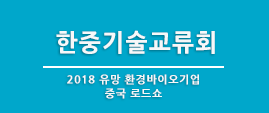
<style>
.page{position:relative;width:269px;height:113px;background:#00a7cb}
.page>*{position:absolute;margin:0}
.t1{font:24px "NanumGothicExtraBold";letter-spacing:0.05em;color:#f6f8f9}
.t2{font:11px/14px "NanumGothicExtraBold";letter-spacing:0.05em;color:#f6f8f9}
</style>
<div class="page">
<p class="t1" style="left:56px;top:30px;width:159px;height:24px">한중기술교류회</p>
<p class="t2" style="left:67px;top:74px;width:132px;height:25px;text-align:center">2018 유망 환경바이오기업 <br>중국 로드쇼</p>
</div>
